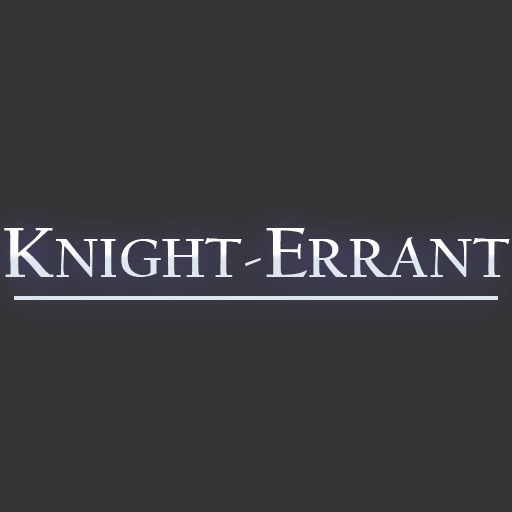
<style>
.page{position:relative;width:512px;height:512px;background:#333333}
.page>*{position:absolute;margin:0}
.t1{font:57.1px "CalifornianFB-Bold"}
.t2{font:73.9px "CalifornianFB-Bold"}
</style>
<div class="page">
<p class="t1" style="left:4px;top:227px;width:506px;height:50px"><span class="t2">K</span>NIGHT-<span class="t2">E</span>RRANT</p>
</div>
